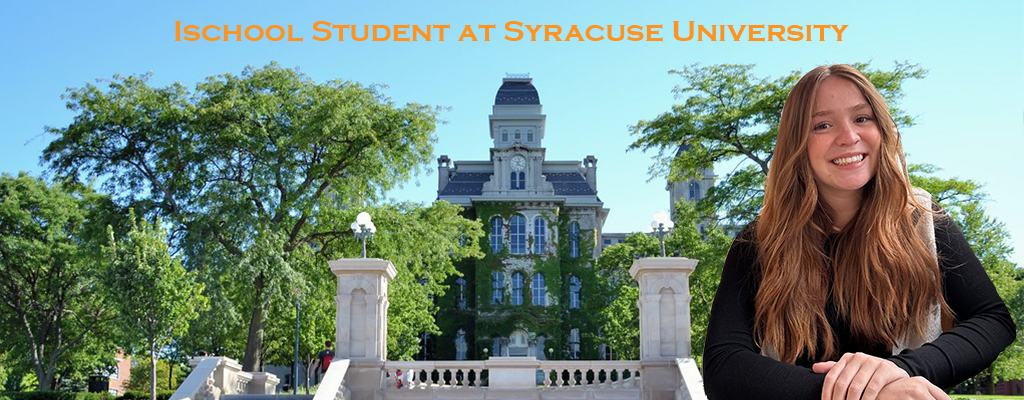
<style>
.page{position:relative;width:1024px;height:400px}
.page>*{position:absolute;margin:0}
.t1{font:30px "CopperplateGothic-Bold";color:#ff9320}
</style>
<div class="page">
<p class="t1" style="left:174px;top:21px;width:675px;height:21px">Ischool Student at Syracuse University</p>
</div>
